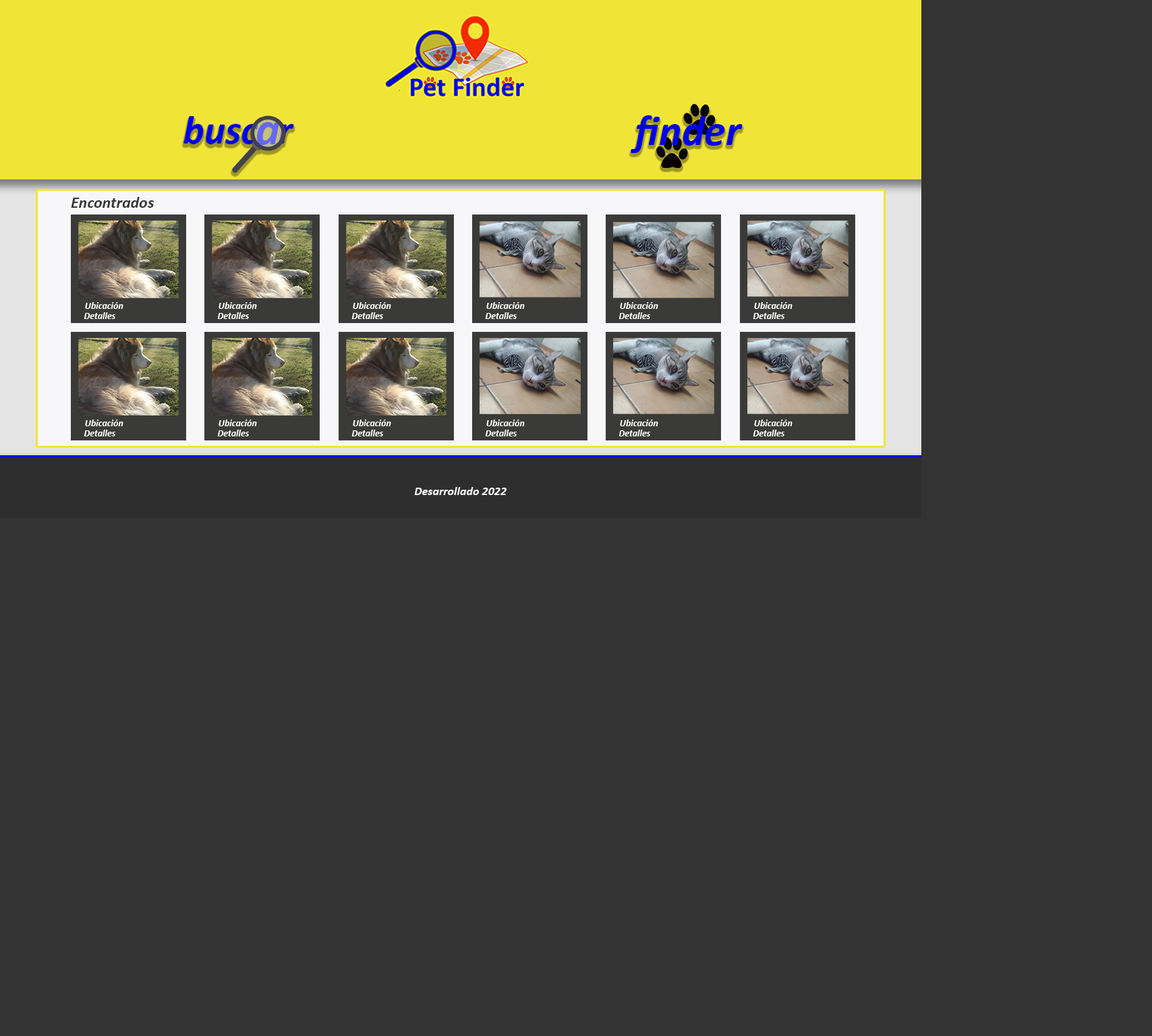
<style>
.page{position:relative;width:1152px;height:1036px;background:#333333}
.page>*{position:absolute;margin:0}
.t1{font:43.2px "Calibri-BoldItalic";color:#0002e8}
.t2{font:16.2px "Calibri-BoldItalic";color:#353535}
.t3{font:9.4px "Calibri-BoldItalic";color:#fcfcfc}
.t4{font:12.1px "Calibri-BoldItalic";color:#faf7f7}
</style>
<div class="page">
<p class="t1" style="left:630px;top:115px;width:112px;height:38px">finder</p>
<p class="t2" style="left:71px;top:197px;width:83px;height:11px">Encontrados</p>
<p class="t3" style="left:85px;top:302px;width:38px;height:7px">Ubicación</p>
<p class="t3" style="left:218px;top:302px;width:39px;height:7px">Ubicación</p>
<p class="t3" style="left:353px;top:302px;width:38px;height:7px">Ubicación</p>
<p class="t3" style="left:486px;top:302px;width:39px;height:7px">Ubicación</p>
<p class="t3" style="left:620px;top:302px;width:38px;height:7px">Ubicación</p>
<p class="t3" style="left:754px;top:302px;width:38px;height:7px">Ubicación</p>
<p class="t3" style="left:84px;top:312px;width:31px;height:7px">Detalles</p>
<p class="t3" style="left:217px;top:312px;width:32px;height:7px">Detalles</p>
<p class="t3" style="left:351px;top:312px;width:32px;height:7px">Detalles</p>
<p class="t3" style="left:485px;top:312px;width:31px;height:7px">Detalles</p>
<p class="t3" style="left:618px;top:312px;width:32px;height:7px">Detalles</p>
<p class="t3" style="left:752px;top:312px;width:32px;height:7px">Detalles</p>
<p class="t3" style="left:85px;top:419px;width:38px;height:7px">Ubicación</p>
<p class="t3" style="left:218px;top:419px;width:39px;height:7px">Ubicación</p>
<p class="t3" style="left:353px;top:419px;width:38px;height:7px">Ubicación</p>
<p class="t3" style="left:486px;top:419px;width:39px;height:7px">Ubicación</p>
<p class="t3" style="left:620px;top:419px;width:38px;height:7px">Ubicación</p>
<p class="t3" style="left:754px;top:419px;width:38px;height:7px">Ubicación</p>
<p class="t3" style="left:84px;top:429px;width:31px;height:7px">Detalles</p>
<p class="t3" style="left:217px;top:429px;width:32px;height:7px">Detalles</p>
<p class="t3" style="left:351px;top:429px;width:32px;height:7px">Detalles</p>
<p class="t3" style="left:485px;top:429px;width:31px;height:7px">Detalles</p>
<p class="t3" style="left:618px;top:429px;width:32px;height:7px">Detalles</p>
<p class="t3" style="left:752px;top:429px;width:32px;height:7px">Detalles</p>
<p class="t4" style="left:414px;top:487px;width:92px;height:8px">Desarrollado 2022</p>
</div>
